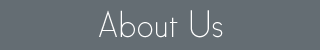
<style>
.page{position:relative;width:320px;height:50px;background:#646d73}
.page>*{position:absolute;margin:0}
.t1{font:33.3px "Satellite";color:#ffffff}
</style>
<div class="page">
<p class="t1" style="left:99px;top:10px;width:124px;height:28px">About Us</p>
</div>
